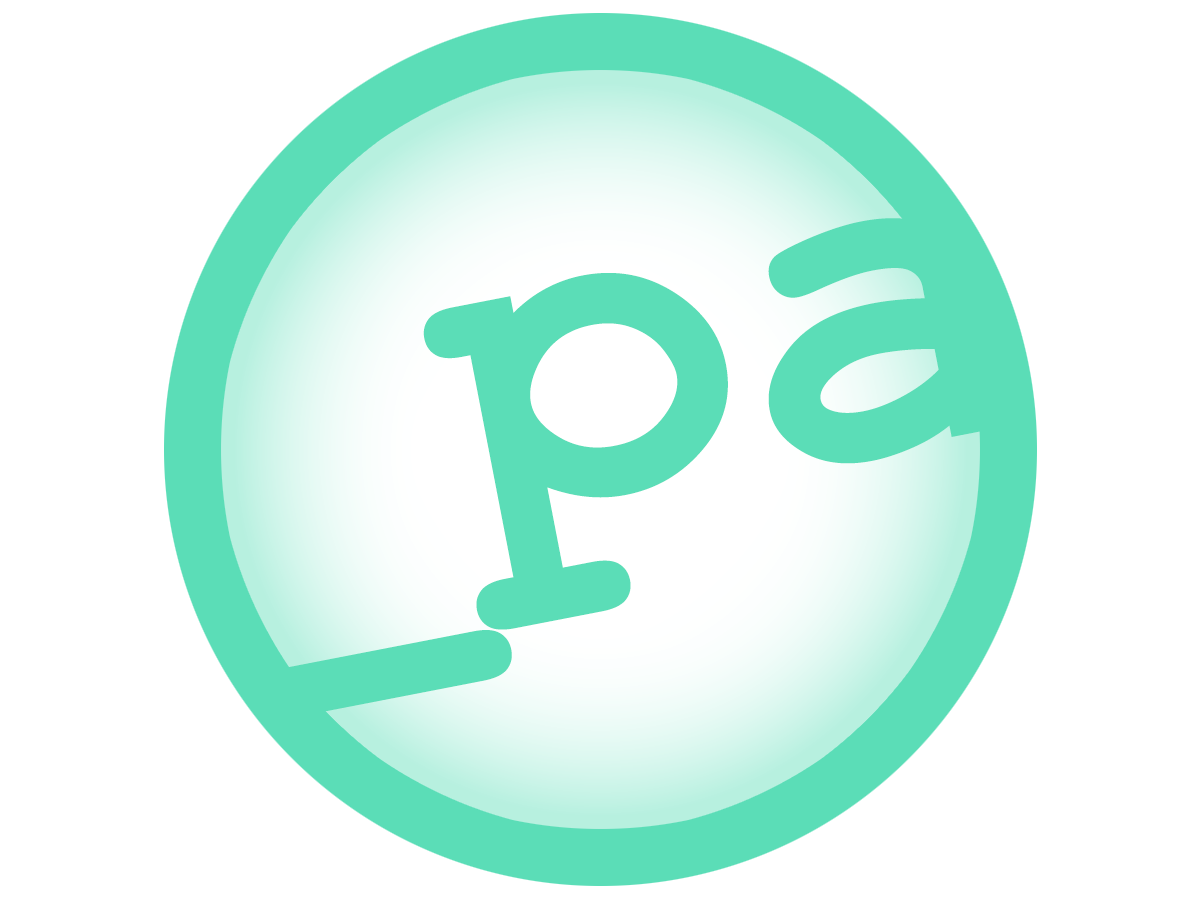
<style>
.page{position:relative;width:1200px;height:900px;background:#ffffff}
.page>*{position:absolute;margin:0}
.t1{font:500.7px "CourierNewPS-BoldMT";color:#5bddb7}
</style>
<div class="page">
<p class="t1" style="left:174px;top:218px;width:865px;height:517px;rotate:-11deg">_pa</p>
</div>
